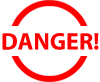
<style>
.page{position:relative;width:100px;height:82px;background:#ffffff}
.page>*{position:absolute;margin:0}
.t1{font:24px "MyriadPro-Bold";color:#ff0000}
</style>
<div class="page">
<p class="t1" style="left:2px;top:33px;width:97px;height:17px">DANGER!</p>
</div>
